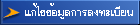
<style>
.page{position:relative;width:140px;height:25px}
.page>*{position:absolute;margin:0}
.t1{font:15.3px "EucrosiaDSE";color:#ffffff;scale:1.12 1}
</style>
<div class="page">
<p class="t1" style="left:25px;top:3px;width:108px;height:16px">á¡éä¢¢éÍÁÙÅ¡ÒÃÅ§·ÐàºÕÂ¹</p>
</div>
